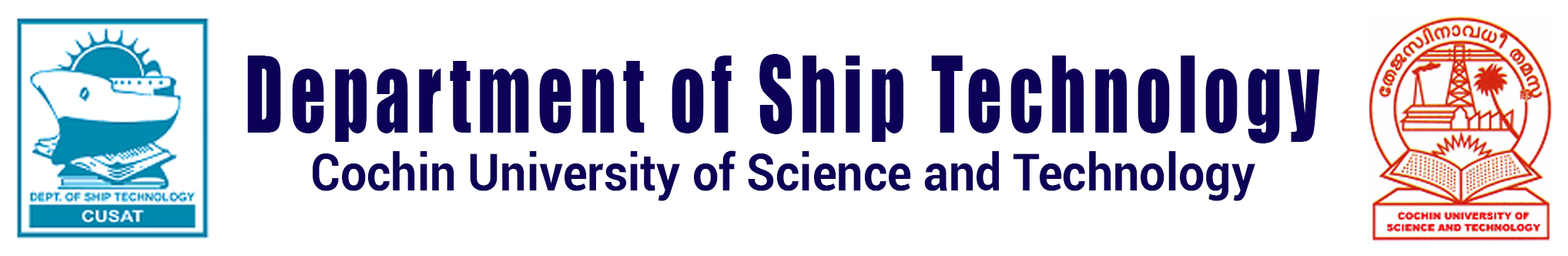
<style>
.page{position:relative;width:1568px;height:256px;background:#ffffff}
.page>*{position:absolute;margin:0}
.t1{font:97.2px "Impact";letter-spacing:0.1em;color:#0d0157;scale:0.71 1}
.t2{font:51.1px "Roboto-Bold";color:#0d0157;scale:0.92 1}
</style>
<div class="page">
<p class="t1" style="left:247px;top:54px;width:1073px;height:89px">Department of Ship Technology</p>
<p class="t2" style="left:313px;top:150px;width:942px;height:51px">Cochin University of Science and Technology</p>
</div>
